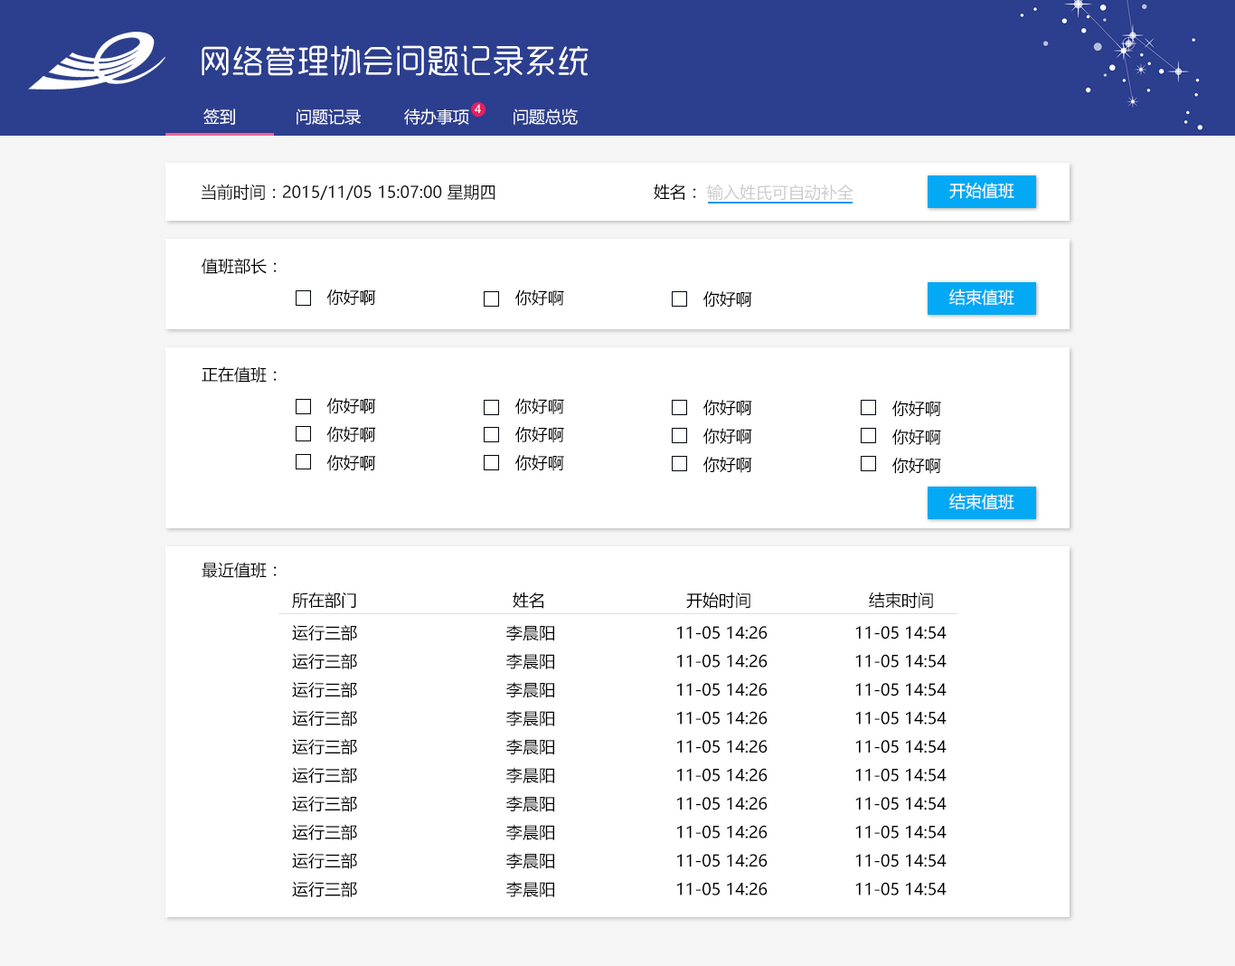
<style>
.page{position:relative;width:1235px;height:966px;background:#ffffff}
.page>*{position:absolute;margin:0}
.t1{font:32.5px "MFYueYuan_Noncommercial-Regular";color:#ffffff}
.t2{font:16.3px "MicrosoftYaHeiUI";color:#ffffff}
.t3{font:10.8px "MicrosoftYaHeiUI";color:#ffffff}
.t4{font:16.3px "MicrosoftYaHeiUI";color:#161616}
.t5{font:16.3px "MicrosoftYaHeiUI";color:#000000}
.t6{font:16.3px "MicrosoftYaHeiUI";color:#cdcdcd}
.t7{font:16.2px "MicrosoftYaHeiUI";color:#000000}
</style>
<div class="page">
<p class="t1" style="left:202px;top:45px;width:387px;height:31px">网络管理协会问题记录系统</p>
<p class="t2" style="left:203px;top:108px;width:32px;height:17px">签到</p>
<p class="t2" style="left:297px;top:108px;width:64px;height:17px">问题记录</p>
<p class="t2" style="left:404px;top:108px;width:65px;height:17px">待办事项</p>
<p class="t3" style="left:475px;top:104px;width:6px;height:9px">4</p>
<p class="t2" style="left:514px;top:108px;width:64px;height:17px">问题总览</p>
<p class="t4" style="left:202px;top:184px;width:293px;height:17px">当前时间：2015/11/05 15:07:00 星期四</p>
<p class="t5" style="left:654px;top:184px;width:42px;height:16px">姓名：</p>
<p class="t6" style="left:707px;top:184px;width:146px;height:17px">输入姓氏可自动补全</p>
<p class="t2" style="left:949px;top:183px;width:65px;height:16px">开始值班</p>
<p class="t5" style="left:202px;top:258px;width:75px;height:16px">值班部长：</p>
<p class="t5" style="left:326px;top:289px;width:50px;height:17px">你好啊</p>
<p class="t7" style="left:515px;top:289px;width:49px;height:17px">你好啊</p>
<p class="t5" style="left:703px;top:291px;width:49px;height:16px">你好啊</p>
<p class="t2" style="left:949px;top:288px;width:65px;height:18px">结束值班</p>
<p class="t5" style="left:202px;top:366px;width:75px;height:16px">正在值班：</p>
<p class="t5" style="left:326px;top:398px;width:50px;height:73px">你好啊<br>你好啊<br>你好啊</p>
<p class="t7" style="left:515px;top:398px;width:49px;height:73px">你好啊<br>你好啊<br>你好啊</p>
<p class="t5" style="left:703px;top:400px;width:49px;height:73px">你好啊<br>你好啊<br>你好啊</p>
<p class="t5" style="left:892px;top:401px;width:49px;height:73px">你好啊<br>你好啊<br>你好啊</p>
<p class="t2" style="left:949px;top:493px;width:65px;height:17px">结束值班</p>
<p class="t5" style="left:202px;top:561px;width:75px;height:17px">最近值班：</p>
<p class="t5" style="left:292px;top:592px;width:64px;height:16px">所在部门</p>
<p class="t5" style="left:513px;top:592px;width:30px;height:16px">姓名</p>
<p class="t5" style="left:686px;top:592px;width:64px;height:16px">开始时间</p>
<p class="t5" style="left:869px;top:591px;width:64px;height:17px">结束时间</p>
<p class="t5" style="left:292px;top:625px;width:655px;height:272px">运行三部                               李晨阳                         11-05 14:26                  11-05 14:54<br>运行三部                               李晨阳                         11-05 14:26                  11-05 14:54<br>运行三部                               李晨阳                         11-05 14:26                  11-05 14:54<br>运行三部                               李晨阳                         11-05 14:26                  11-05 14:54<br>运行三部                               李晨阳                         11-05 14:26                  11-05 14:54<br>运行三部                               李晨阳                         11-05 14:26                  11-05 14:54<br>运行三部                               李晨阳                         11-05 14:26                  11-05 14:54<br>运行三部                               李晨阳                         11-05 14:26                  11-05 14:54<br>运行三部                               李晨阳                         11-05 14:26                  11-05 14:54<br>运行三部                               李晨阳                         11-05 14:26                  11-05 14:54</p>
</div>
